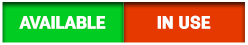
<style>
.page{position:relative;width:248px;height:45px;background:#e63900}
.page>*{position:absolute;margin:0}
.t1{font:18.2px "Antartida-Black";color:#ffffff}
</style>
<div class="page">
<p class="t1" style="left:19px;top:16px;width:87px;height:13px">AVAILABLE</p>
<p class="t1" style="left:157px;top:15px;width:54px;height:14px">IN USE</p>
</div>
